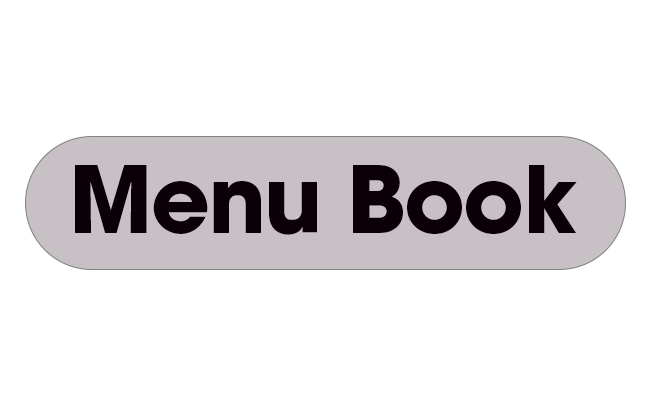
<style>
.page{position:relative;width:650px;height:400px;background:#ffffff}
.page>*{position:absolute;margin:0}
.t1{font:91.7px "ITCAvantGardePro-Bold";letter-spacing:-0.02em;color:#000000}
</style>
<div class="page">
<p class="t1" style="left:75px;top:165px;width:502px;height:70px">Menu Book</p>
</div>
